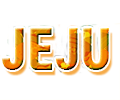
<style>
.page{position:relative;width:120px;height:100px;background:#ffffff}
.page>*{position:absolute;margin:0}
.t1{font:48px "HeadlineR-HM";scale:0.85 1}
.t2{font:48px "Gulim";scale:0.85 1}
</style>
<div class="page">
<p class="t1" style="left:1px;top:28px;width:108px;height:42px"><span class="t2"><br></span>JEJU</p>
</div>
